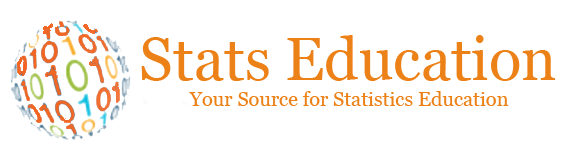
<style>
.page{position:relative;width:574px;height:156px;background:#ffffff}
.page>*{position:absolute;margin:0}
.t1{font:60px "Georgia";color:#ec8118}
.t2{font:20px "Georgia";color:#ec8118}
</style>
<div class="page">
<p class="t1" style="left:141px;top:35px;width:414px;height:46px">Stats Education</p>
<p class="t2" style="left:189px;top:91px;width:320px;height:15px">Your Source for Statistics Education</p>
</div>
